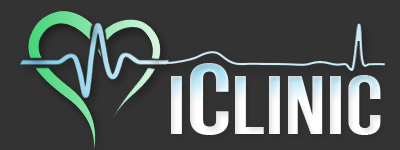
<style>
.page{position:relative;width:400px;height:150px;background:#333333}
.page>*{position:absolute;margin:0}
.t1{font:83.3px "BebasNeue-Regular";color:#ffffff;scale:1.18 1}
.t2{font:83.3px "BebasNeue-Regular";color:#94d9f4;scale:1.18 1}
.t3{font:100px "BebasNeue-Regular";color:#ffffff;scale:1.18 1}
</style>
<div class="page">
<p class="t1" style="left:171px;top:63px;width:210px;height:72px"><span class="t2">I</span><span class="t3">C</span>linic</p>
</div>
